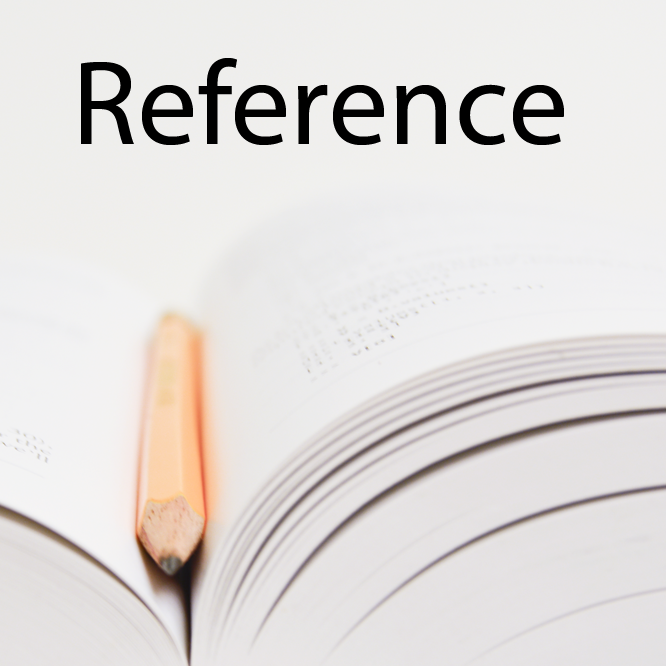
<style>
.page{position:relative;width:666px;height:666px}
.page>*{position:absolute;margin:0}
.t1{font:120px "MyriadPro-Regular";color:#000000}
</style>
<div class="page">
<p class="t1" style="left:81px;top:58px;width:483px;height:87px">Reference</p>
</div>
